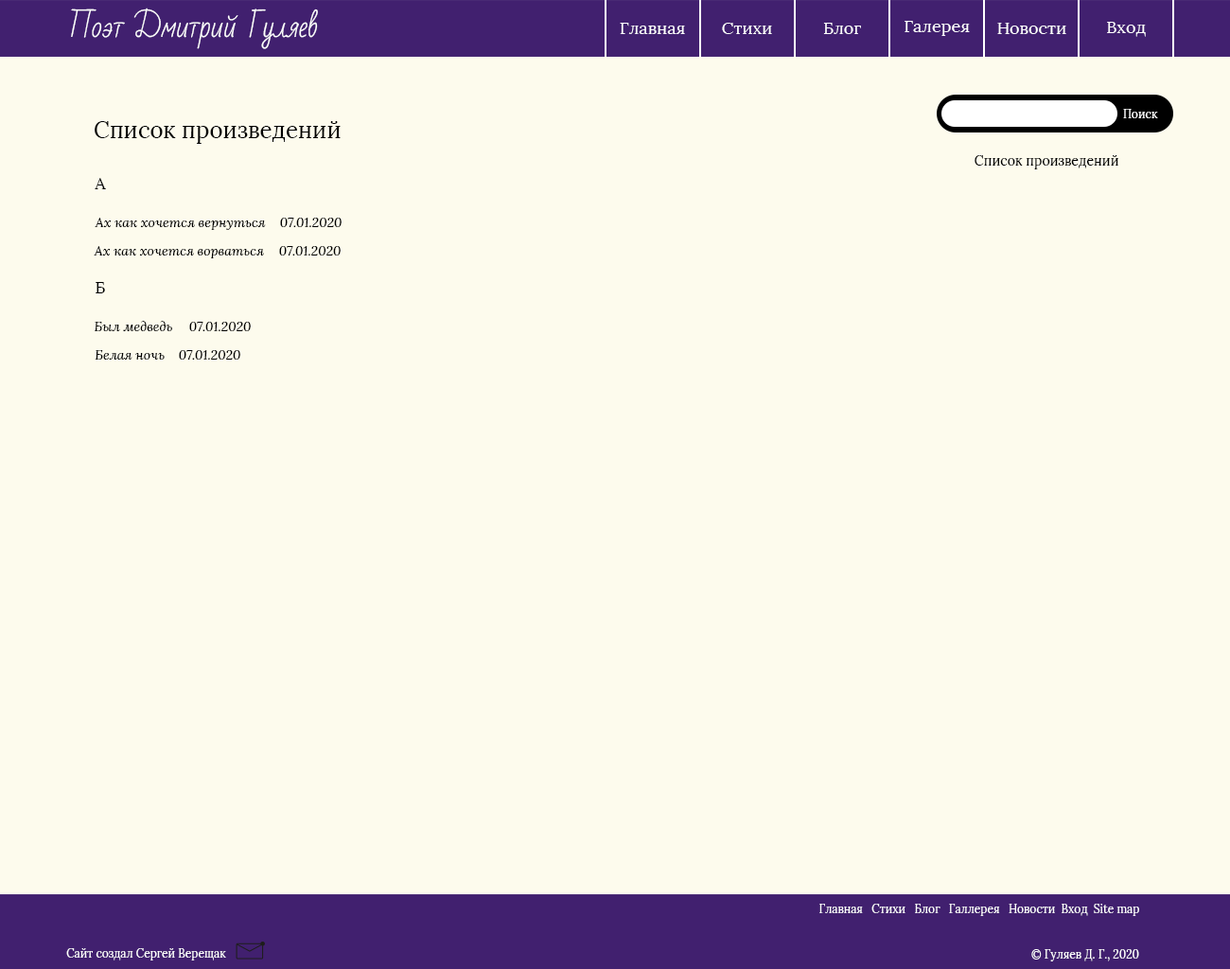
<style>
.page{position:relative;width:1230px;height:969px;background:#fdfbed}
.page>*{position:absolute;margin:0}
.t1{font:28.4px "BadScript-Regular";color:#ffffff}
.t2{font:17px "Lora-Regular";color:#ffffff}
.t3{font:11.4px "Lora-Regular";letter-spacing:0.005em;color:#ffffff}
.t4{font:22.7px "Lora-Regular";letter-spacing:0.005em;color:#000000}
.t5{font:13.3px "Lora-Regular";letter-spacing:0.005em;color:#000000}
.t6{font:17px "Lora-Regular";letter-spacing:0.005em;color:#000000}
.t7{font:13.3px "Lora-Italic";letter-spacing:0.005em;color:#000000}
.t8{font:11.4px "Lora-Regular";color:#ffffff}
</style>
<div class="page">
<p class="t1" style="left:71px;top:8px;width:247px;height:41px">Поэт Дмитрий Гуляев</p>
<p class="t2" style="left:620px;top:23px;width:65px;height:11px">Главная</p>
<p class="t2" style="left:722px;top:23px;width:50px;height:11px">Стихи</p>
<p class="t2" style="left:823px;top:23px;width:38px;height:11px">Блог</p>
<p class="t2" style="left:905px;top:21px;width:65px;height:15px">Галерея</p>
<p class="t2" style="left:998px;top:23px;width:69px;height:11px">Новости</p>
<p class="t2" style="left:1107px;top:22px;width:39px;height:15px">Вход</p>
<p class="t3" style="left:1123px;top:109px;width:35px;height:9px">Поиск</p>
<p class="t4" style="left:95px;top:121px;width:246px;height:23px">Список произведений</p>
<p class="t5" style="left:975px;top:155px;width:144px;height:14px">Список произведений</p>
<p class="t6" style="left:95px;top:178px;width:11px;height:11px">А</p>
<p class="t7" style="left:95px;top:218px;width:171px;height:12px">Ах как хочется вернуться</p>
<p class="t7" style="left:280px;top:218px;width:62px;height:9px">07.01.2020</p>
<p class="t7" style="left:94px;top:246px;width:170px;height:12px">Ах как хочется ворваться</p>
<p class="t7" style="left:279px;top:246px;width:62px;height:10px">07.01.2020</p>
<p class="t6" style="left:96px;top:282px;width:9px;height:11px">Б</p>
<p class="t7" style="left:94px;top:321px;width:78px;height:10px">Был медведь</p>
<p class="t7" style="left:189px;top:322px;width:62px;height:9px">07.01.2020</p>
<p class="t7" style="left:95px;top:350px;width:70px;height:10px">Белая ночь</p>
<p class="t7" style="left:179px;top:350px;width:61px;height:10px">07.01.2020</p>
<p class="t8" style="left:820px;top:904px;width:320px;height:12px">Главная   Стихи   Блог   Галлерея   Новости  Вход  Site map</p>
<p class="t8" style="left:66px;top:948px;width:160px;height:13px">Сайт создал Сергей Верещак</p>
<p class="t8" style="left:1032px;top:949px;width:108px;height:13px">© Гуляев Д. Г., 2020</p>
</div>
